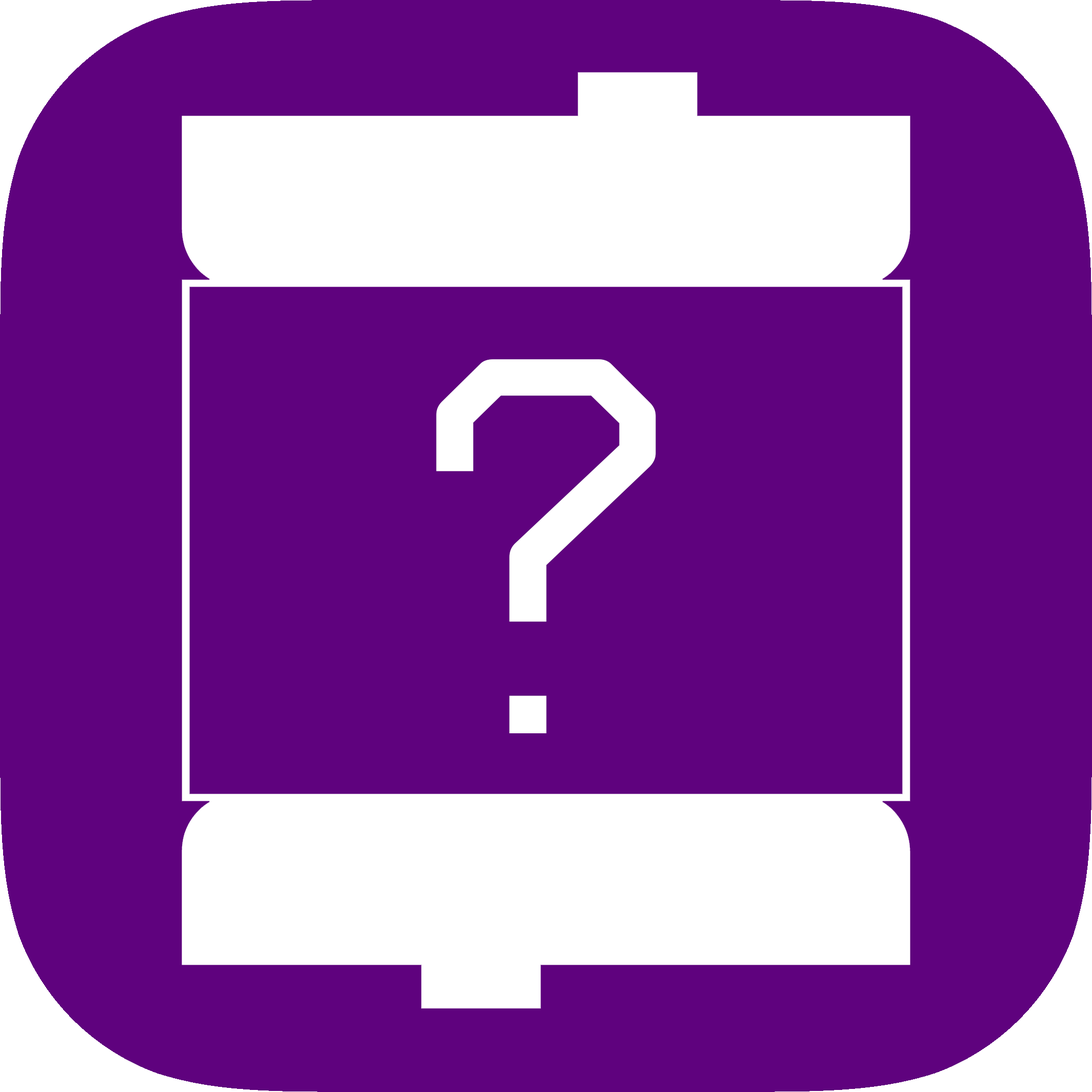
<style>
.page{position:relative;width:1092px;height:1092px;background:#5f027e}
.page>*{position:absolute;margin:0}
.t1{font:614.1px "ibm3270-Regular";color:#ffffff}
</style>
<div class="page">
<p class="t1" style="left:436px;top:359px;width:220px;height:374px">?</p>
</div>
